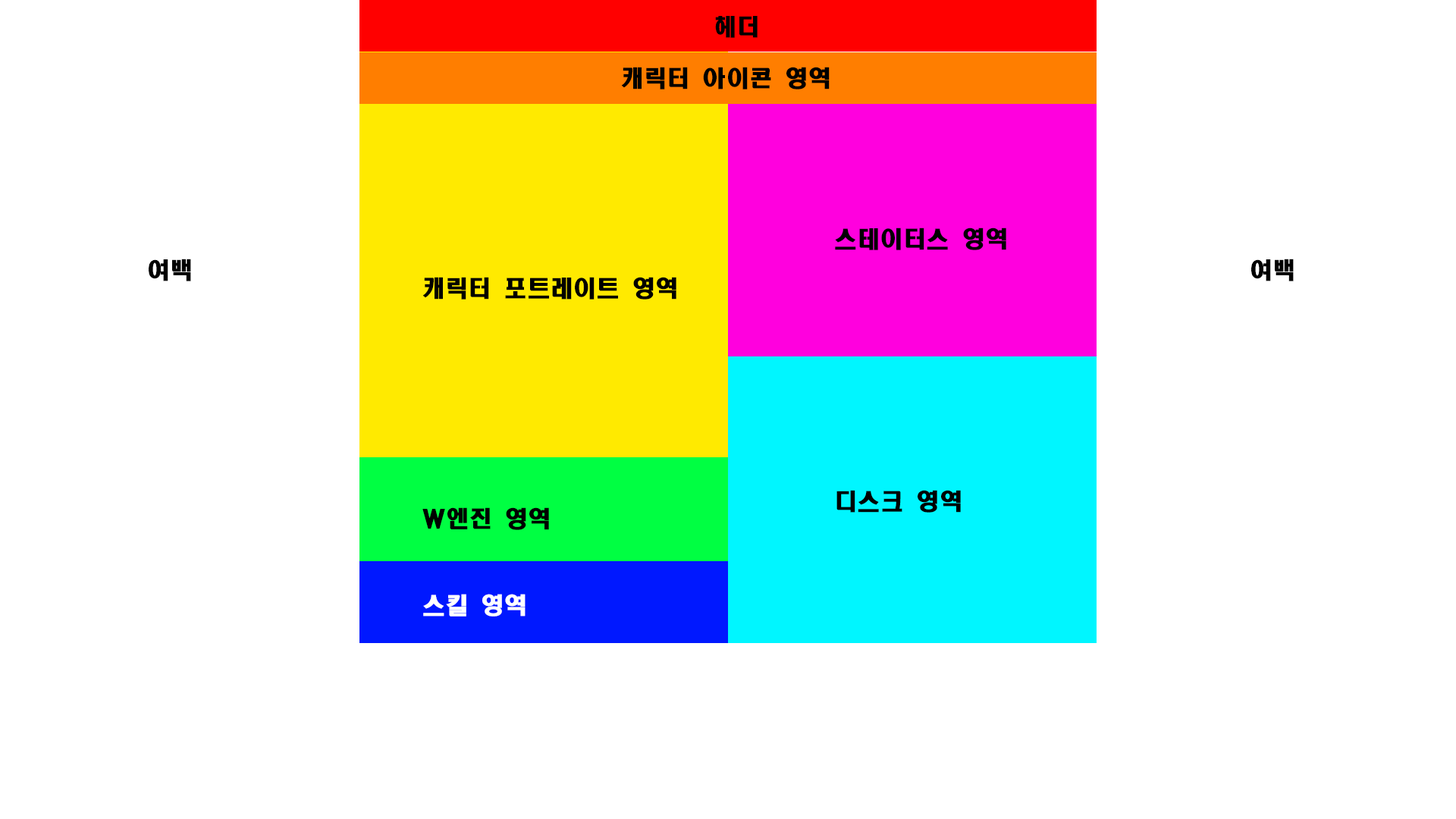
<style>
.page{position:relative;width:1456px;height:819px;background:#ffffff}
.page>*{position:absolute;margin:0}
.t1{font:22.7px "HeadlineR-HM";letter-spacing:0.04em;color:#000000}
.t2{font:22.7px "HeadlineR-HM";letter-spacing:0.04em;color:#ffffff}
</style>
<div class="page">
<p class="t1" style="left:715px;top:16px;width:43px;height:22px">헤더</p>
<p class="t1" style="left:621px;top:67px;width:209px;height:22px">캐릭터 아이콘 영역</p>
<p class="t1" style="left:835px;top:227px;width:171px;height:23px">스테이터스 영역</p>
<p class="t1" style="left:149px;top:259px;width:42px;height:22px">여백</p>
<p class="t1" style="left:1251px;top:259px;width:43px;height:22px">여백</p>
<p class="t1" style="left:422px;top:277px;width:254px;height:23px">캐릭터 포트레이트 영역</p>
<p class="t1" style="left:836px;top:490px;width:125px;height:23px">디스크 영역</p>
<p class="t1" style="left:422px;top:507px;width:127px;height:23px">W엔진 영역</p>
<p class="t2" style="left:423px;top:594px;width:103px;height:23px">스킬 영역</p>
</div>
